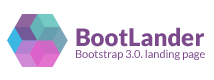
<style>
.page{position:relative;width:214px;height:80px;background:#ffffff}
.page>*{position:absolute;margin:0}
.t1{font:24px "Lato-Black";color:#7c4a8c}
.t2{font:11px "Lato-Regular";color:#7c4a8c}
</style>
<div class="page">
<p class="t1" style="left:76px;top:27px;width:129px;height:20px">BootLander</p>
<p class="t2" style="left:76px;top:49px;width:129px;height:11px">Bootstrap 3.0. landing page</p>
</div>
